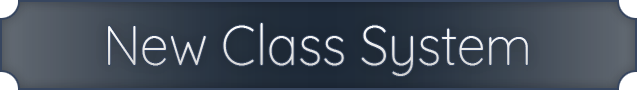
<style>
.page{position:relative;width:637px;height:90px}
.page>*{position:absolute;margin:0}
.t1{font:55.5px "Quicksand-Light";color:#eaeaea;scale:0.93 1}
</style>
<div class="page">
<p class="t1" style="left:108px;top:23px;width:420px;height:53px">New Class System</p>
</div>
